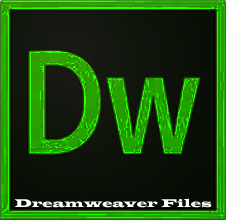
<style>
.page{position:relative;width:226px;height:220px}
.page>*{position:absolute;margin:0}
.t1{font:11.8px "LatinWide";color:#ffffff}
</style>
<div class="page">
<p class="t1" style="left:14px;top:198px;width:198px;height:10px">Dreamweaver Files</p>
</div>
